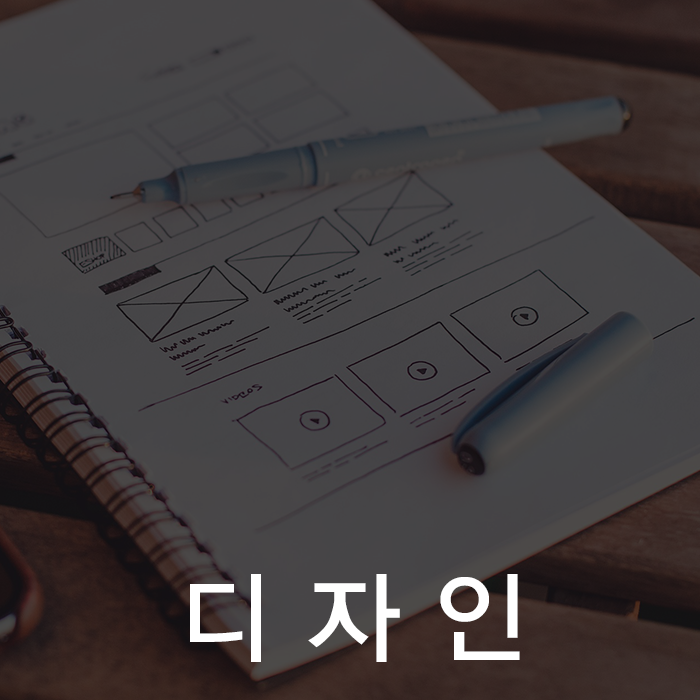
<style>
.page{position:relative;width:700px;height:700px}
.page>*{position:absolute;margin:0}
.t1{font:100px "YDIYGO330";color:#ffffff}
</style>
<div class="page">
<p class="t1" style="left:190px;top:574px;width:330px;height:88px">디 자 인</p>
</div>
